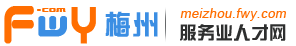
<style>
.page{position:relative;width:296px;height:46px;background:#ffffff}
.page>*{position:absolute;margin:0}
.t1{font:47.8px "QuantumRound(BRK)";letter-spacing:0.01em;color:#ff6e01;font-weight:bold;scale:0.76 1}
.t2{font:7.9px "Underwhelmed(BRK)";letter-spacing:0.01em;color:#ff6d00;scale:1.29 1}
.t3{font:35px "QuantumRound(BRK)";letter-spacing:0.01em;color:#3b8ee3;font-weight:bold}
.t4{font:9.7px "VarianceBRK";letter-spacing:0.01em;color:#ff6d00;scale:0.95 1}
.t5{font:35.9px "roundabout";letter-spacing:0.01em;color:#ff6e01;font-weight:bold;scale:0.93 1}
.t6{font:27.5px "FZZYJW--GB1-0";letter-spacing:0.01em;color:#3b8ee3}
.t7{font:13px "ArialMT";letter-spacing:0.03em;color:#ff6e01;font-style:italic}
.t8{font:18.3px "FZZYJW--GB1-0";letter-spacing:0.01em;color:#191c1c}
</style>
<div class="page">
<p class="t1" style="left:4px;top:6px;width:30px;height:38px">f</p>
<p class="t2" style="left:37px;top:9px;width:4px;height:2px">.</p>
<p class="t3" style="left:38px;top:16px;width:29px;height:21px">w</p>
<p class="t4" style="left:42px;top:8px;width:24px;height:4px">com</p>
<p class="t5" style="left:71px;top:7px;width:25px;height:37px">y</p>
<p class="t6" style="left:105px;top:11px;width:53px;height:26px">梅州</p>
<p class="t7" style="left:180px;top:8px;width:106px;height:13px">meizhou.fwy.com</p>
<p class="t8" style="left:180px;top:24px;width:106px;height:17px">服务业人才网</p>
</div>
